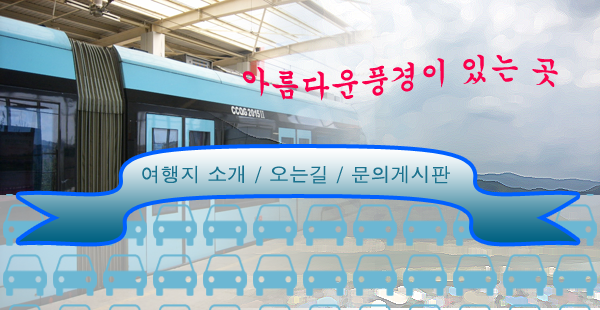
<style>
.page{position:relative;width:600px;height:310px}
.page>*{position:absolute;margin:0}
.t1{font:30px "Gungsuh";color:#fa004c;text-transform:uppercase}
.t2{font:20px "Dotum";color:#1b728e;text-transform:uppercase}
</style>
<div class="page">
<p class="t1" style="left:243px;top:54px;width:315px;height:47px">아름다운풍경이 있는 곳</p>
<p class="t2" style="left:142px;top:165px;width:308px;height:19px">여행지 소개 / 오는길 / 문의게시판</p>
</div>
